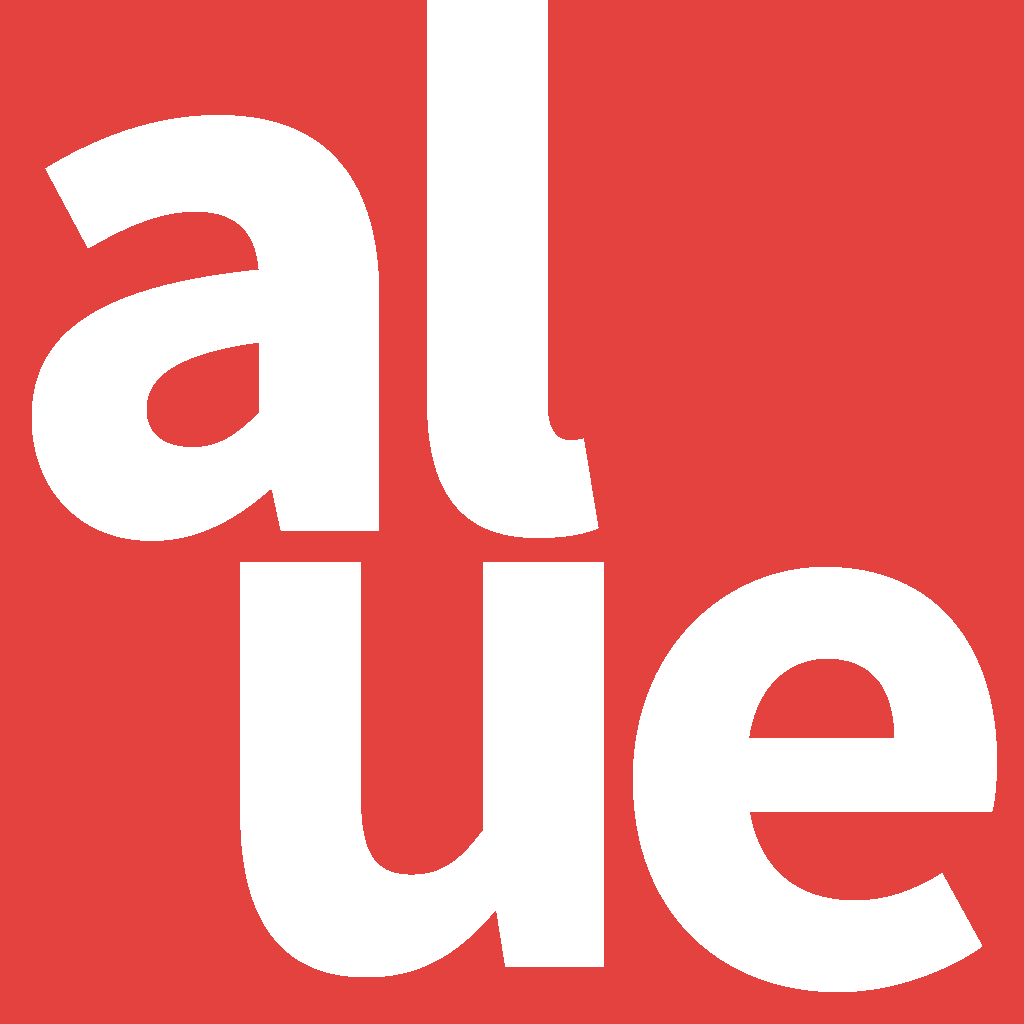
<style>
.page{position:relative;width:1024px;height:1024px;background:#e3423f}
.page>*{position:absolute;margin:0}
.t1{font:816.8px "SourceSansPro-Bold";color:#ffffff}
</style>
<div class="page">
<p class="t1" style="left:32px;top:115px;width:347px;height:426px">a</p>
<p class="t1" style="left:240px;top:562px;width:364px;height:415px">u</p>
<p class="t1" style="left:633px;top:567px;width:364px;height:425px">e</p>
</div>
